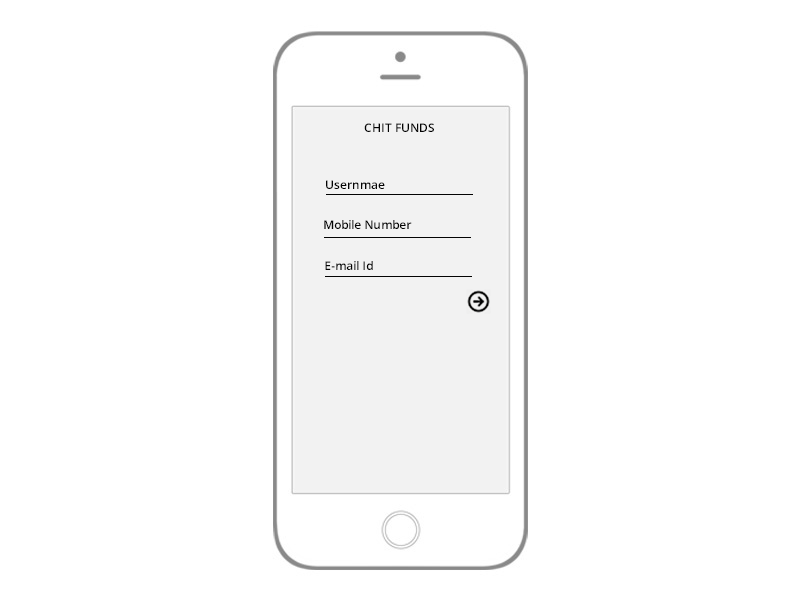
<style>
.page{position:relative;width:800px;height:600px;background:#ffffff}
.page>*{position:absolute;margin:0}
.t1{font:12px "OpenSans-Semibold";color:#030303}
</style>
<div class="page">
<p class="t1" style="left:364px;top:123px;width:70px;height:9px">CHIT FUNDS</p>
<p class="t1" style="left:326px;top:180px;width:59px;height:9px">Usernmae</p>
<p class="t1" style="left:324px;top:220px;width:88px;height:9px">Mobile Number</p>
<p class="t1" style="left:325px;top:261px;width:48px;height:9px">E-mail Id</p>
</div>
